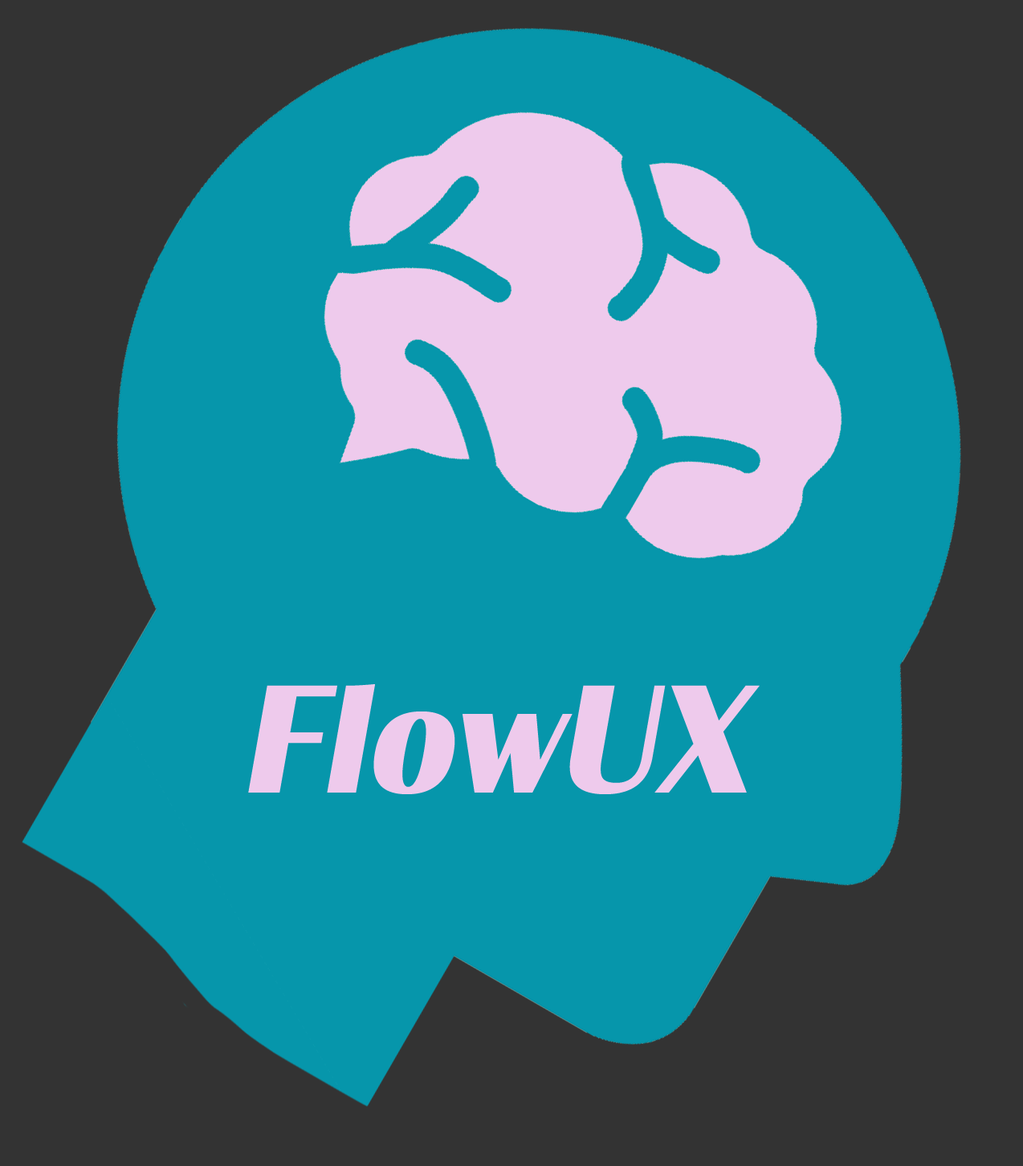
<style>
.page{position:relative;width:1023px;height:1166px;background:#0696ab}
.page>*{position:absolute;margin:0}
.t1{font:160.6px "BritannicBold";color:#eecaec;font-style:italic}
</style>
<div class="page">
<p class="t1" style="left:248px;top:684px;width:512px;height:110px">FlowUX</p>
</div>
